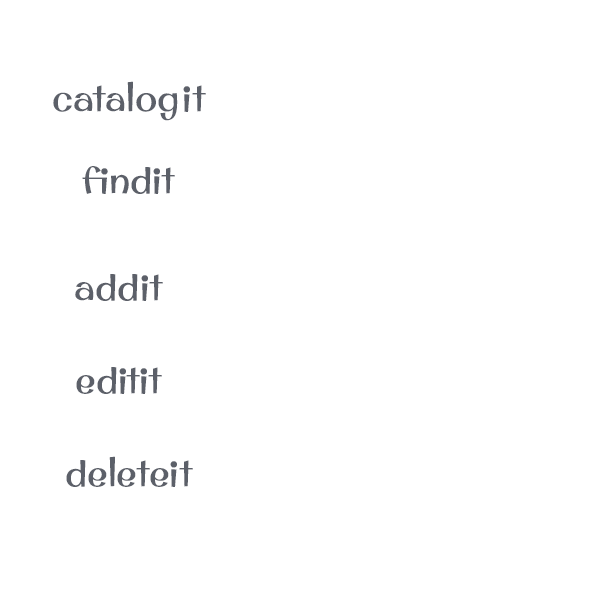
<style>
.page{position:relative;width:600px;height:600px;background:#ffffff}
.page>*{position:absolute;margin:0}
.t1{font:37.5px "OriginalSurfer-Regular";color:#5c6069}
</style>
<div class="page">
<p class="t1" style="left:53px;top:81px;width:153px;height:40px">catalogit</p>
<p class="t1" style="left:82px;top:166px;width:93px;height:28px">findit</p>
<p class="t1" style="left:75px;top:274px;width:88px;height:27px">addit</p>
<p class="t1" style="left:76px;top:367px;width:86px;height:27px">editit</p>
<p class="t1" style="left:66px;top:456px;width:127px;height:31px">deleteit</p>
</div>
